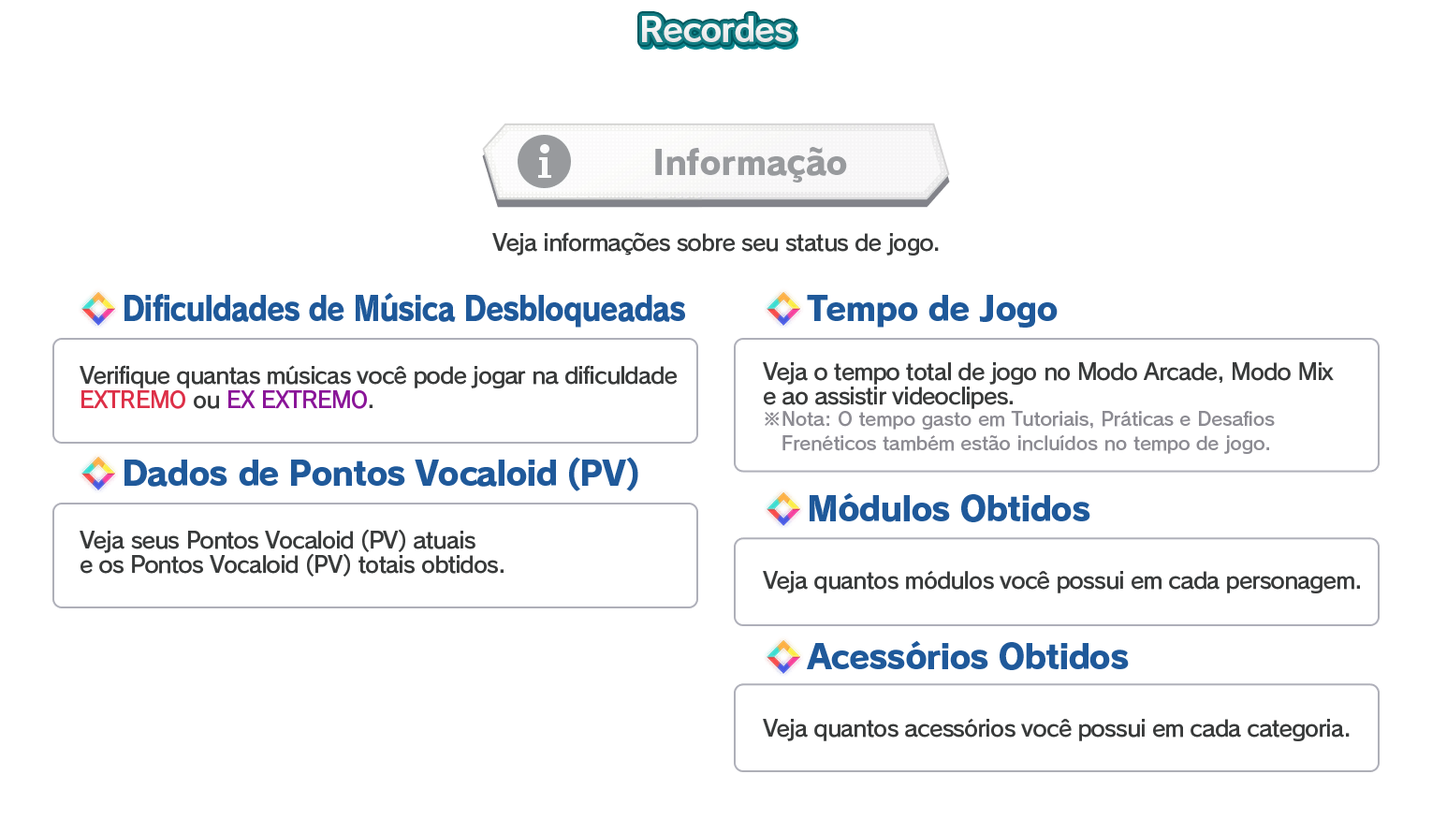
<style>
.page{position:relative;width:1432px;height:833px;background:#ffffff}
.page>*{position:absolute;margin:0}
.t1{font:33.7px "RodinPro-B";letter-spacing:-0.039em;color:#f0f0f1}
.t2{font:33.7px "RodinPro-EB";letter-spacing:-0.015em;color:#989a9d}
.t3{font:22.5px "RodinPro-DB";letter-spacing:-0.04em;color:#383a3a}
.t4{font:33.7px "RodinPro-EB";letter-spacing:-0.04em;color:#1f599a;scale:0.87 1}
.t5{font:33.7px "RodinPro-EB";letter-spacing:-0.04em;color:#1f599a}
.t6{font:22.5px/23.7px "RodinPro-DB";letter-spacing:-0.04em;color:#383a3a}
.t7{font:22.5px/23.7px "RodinPro-DB";letter-spacing:-0.04em;color:#dd3048}
.t8{font:22.5px/23.7px "RodinPro-DB";letter-spacing:-0.04em;color:#8a1598}
.t9{font:18.7px/23.7px "RodinPro-DB";letter-spacing:-0.014em;color:#8c8b92}
</style>
<div class="page">
<p class="t1" style="left:642px;top:16px;width:150px;height:26px">Recordes</p>
<p class="t2" style="left:655px;top:147px;width:192px;height:35px">Informação</p>
<p class="t3" style="left:492px;top:232px;width:447px;height:23px">Veja informações sobre seu status de jogo.</p>
<p class="t4" style="left:124px;top:292px;width:561px;height:36px">Dificuldades de Música Desbloqueadas</p>
<p class="t5" style="left:807px;top:295px;width:250px;height:33px">Tempo de Jogo</p>
<p class="t6" style="left:80px;top:365px;width:598px;height:44px">Verifique quantas músicas você pode jogar na dificuldade<br><span class="t7">EXTREMO</span> ou <span class="t8">EX EXTREMO</span>.</p>
<p class="t6" style="left:763px;top:362px;width:570px;height:47px">Veja o tempo total de jogo no Modo Arcade, Modo Mix<br>e ao assistir videoclipes.</p>
<p class="t9" style="left:765px;top:411px;width:510px;height:43px">※Nota: O tempo gasto em Tutoriais, Práticas e Desafios<br>   Frenéticos também estão incluídos no tempo de jogo.</p>
<p class="t5" style="left:124px;top:457px;width:514px;height:34px">Dados de Pontos Vocaloid (PV)</p>
<p class="t5" style="left:809px;top:492px;width:281px;height:30px">Módulos Obtidos</p>
<p class="t6" style="left:80px;top:529px;width:423px;height:47px">Veja seus Pontos Vocaloid (PV) atuais<br>e os Pontos Vocaloid (PV) totais obtidos.</p>
<p class="t3" style="left:763px;top:570px;width:597px;height:23px">Veja quantos módulos você possui em cada personagem.</p>
<p class="t5" style="left:807px;top:640px;width:322px;height:30px">Acessórios Obtidos</p>
<p class="t3" style="left:763px;top:718px;width:586px;height:23px">Veja quantos acessórios você possui em cada categoria.</p>
</div>
